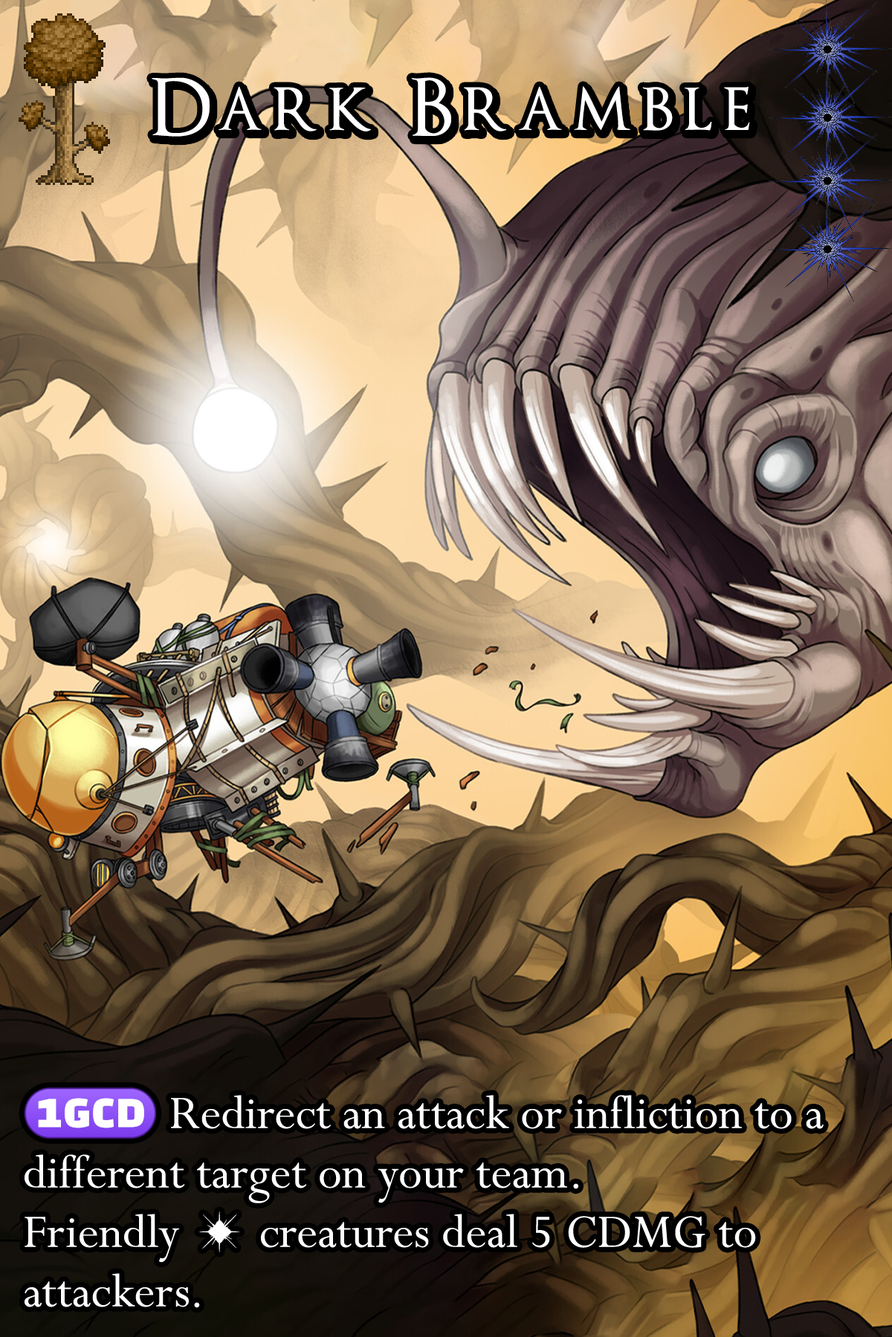
<style>
.page{position:relative;width:892px;height:1337px}
.page>*{position:absolute;margin:0}
.t1{font:132.8px "OptimusPrinceps";letter-spacing:0.12em;color:#ffffff}
.t2{font:52px/59.4px "Perpetua";color:#ffffff}
.t3{font:52px/59.4px "stoogedings-Regular";color:#ffffff}
</style>
<div class="page">
<p class="t1" style="left:152px;top:77px;width:598px;height:60px">Dark Bramble</p>
<p class="t2" style="left:24px;top:1088px;width:799px;height:220px"><span class="t3">(1GCD)</span> Redirect an attack or infliction to a different target on your team.<br>Friendly <span class="t3">[light:tint]</span> creatures deal 5 CDMG to attackers.</p>
</div>
